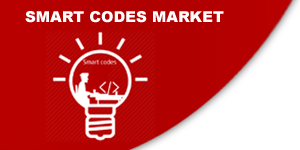
<style>
.page{position:relative;width:300px;height:150px;background:#ffffff}
.page>*{position:absolute;margin:0}
.t1{font:15.1px "Arial-Black";color:#ffffff}
</style>
<div class="page">
<p class="t1" style="left:25px;top:11px;width:199px;height:12px">SMART CODES MARKET</p>
</div>
